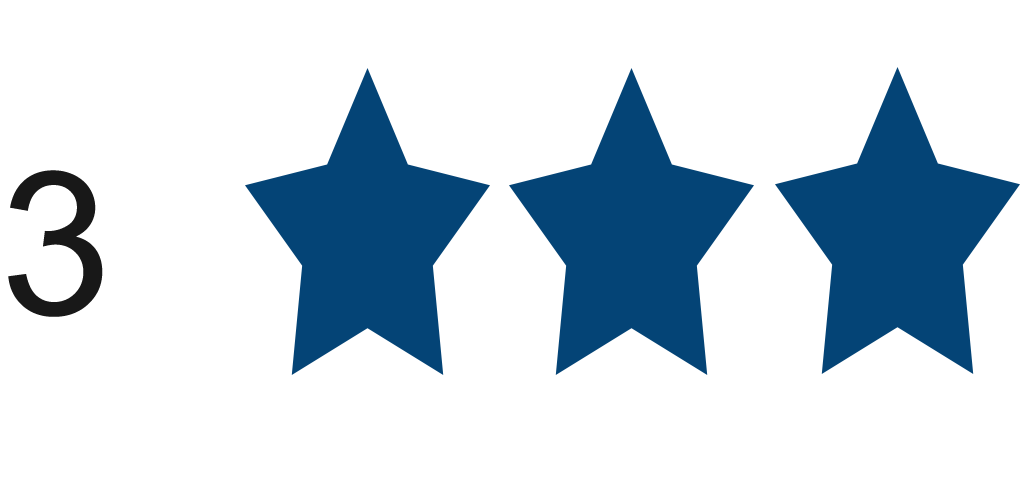
<style>
.page{position:relative;width:1036px;height:500px;background:#ffffff}
.page>*{position:absolute;margin:0}
.t1{font:200px "ArialMT";color:#181818}
</style>
<div class="page">
<p class="t1" style="left:8px;top:170px;width:95px;height:147px">3</p>
</div>
